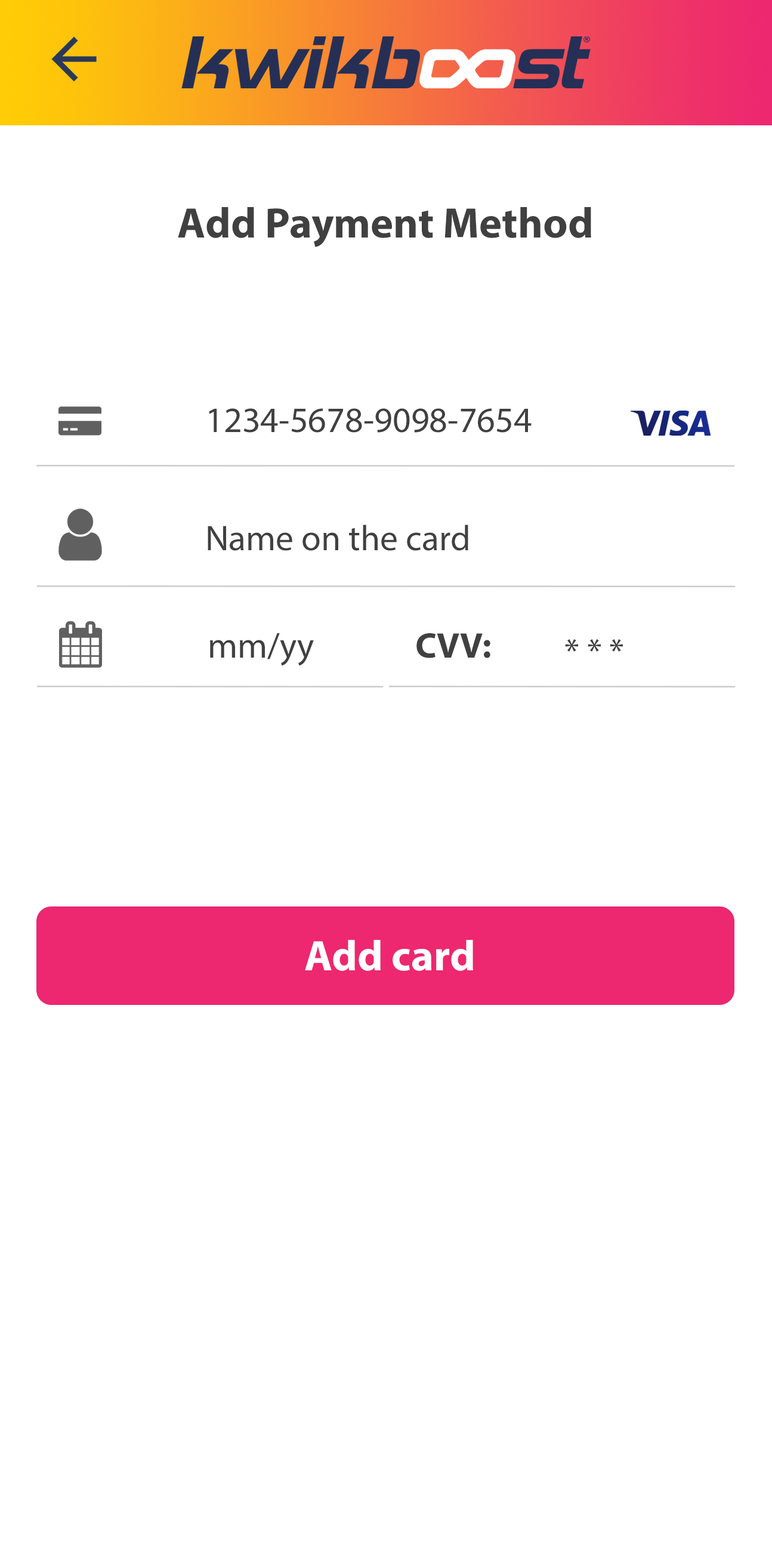
<style>
.page{position:relative;width:772px;height:1545px;background:#ffffff}
.page>*{position:absolute;margin:0}
.t1{font:43px "MyriadPro-Bold";color:#404040}
.t2{font:35.8px "MyriadPro-Regular";color:#404040}
.t3{font:35.8px "MyriadPro-Bold";color:#404040}
.t4{font:43px "MyriadPro-Bold";color:#ffffff}
</style>
<div class="page">
<p class="t1" style="left:178px;top:207px;width:413px;height:40px">Add Payment Method</p>
<p class="t2" style="left:209px;top:408px;width:323px;height:25px">1234-5678-9098-7654</p>
<p class="t2" style="left:208px;top:524px;width:260px;height:27px">Name on the card</p>
<p class="t2" style="left:210px;top:633px;width:104px;height:33px">mm/yy</p>
<p class="t3" style="left:416px;top:633px;width:74px;height:25px">CVV:</p>
<p class="t2" style="left:565px;top:639px;width:58px;height:12px">* * *</p>
<p class="t4" style="left:305px;top:940px;width:168px;height:31px">Add card</p>
</div>
